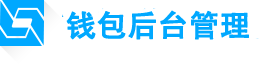
<style>
.page{position:relative;width:280px;height:64px;background:#ffffff}
.page>*{position:absolute;margin:0}
.t1{font:30px "STHeiti";color:#00a8ff;font-weight:bold}
</style>
<div class="page">
<p class="t1" style="left:66px;top:10px;width:183px;height:30px">钱包后台管理</p>
</div>
